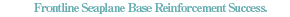
<style>
.page{position:relative;width:290px;height:17px;background:#ffffff}
.page>*{position:absolute;margin:0}
.t1{font:12px "RyuminPro-ExBold";letter-spacing:-0.08em;color:#67afb2}
</style>
<div class="page">
<p class="t1" style="left:34px;top:2px;width:233px;height:12px">Frontline Seaplane Base Reinforcement Success.</p>
</div>
